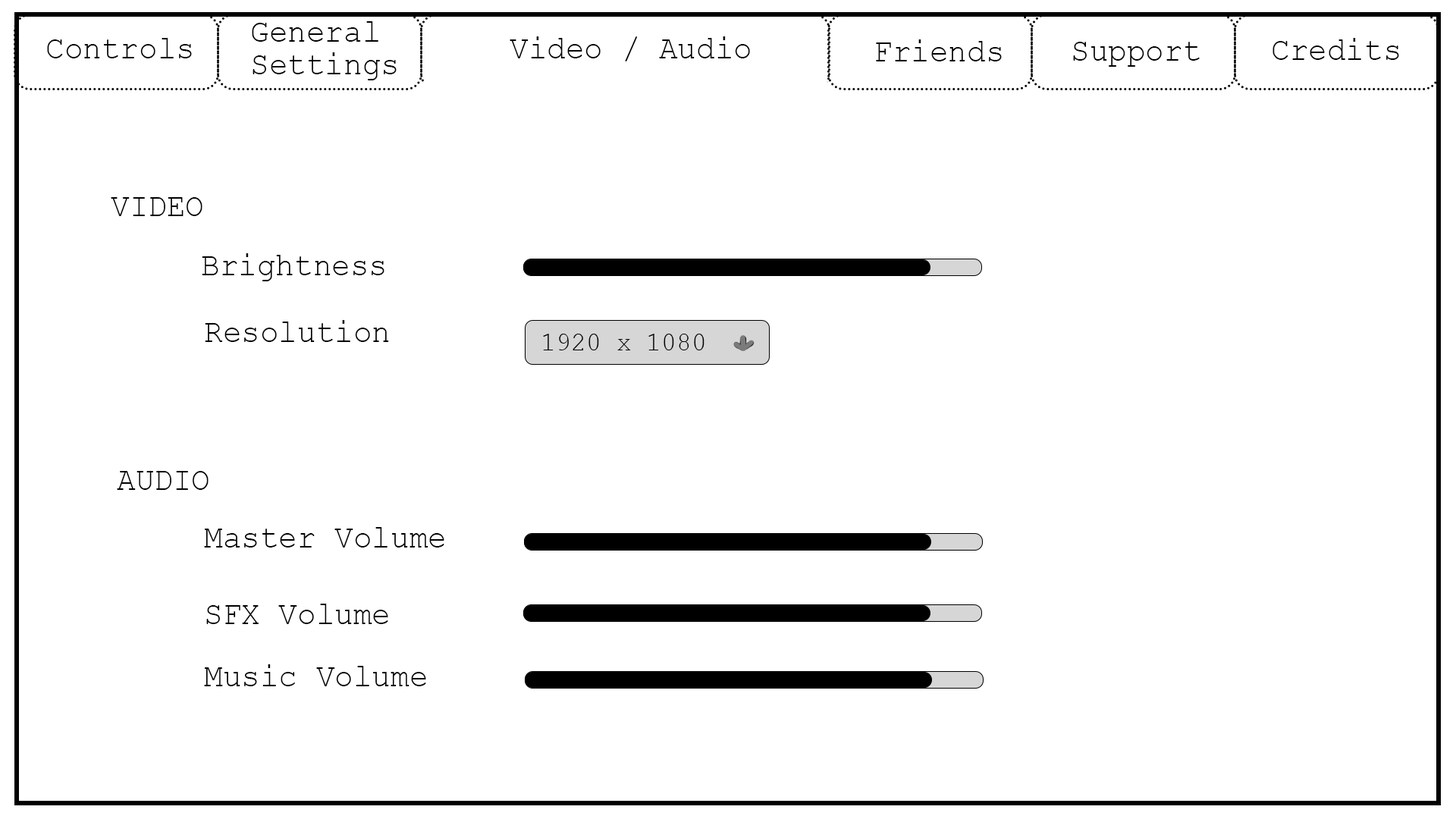
<style>
.page{position:relative;width:1456px;height:819px;background:#ffffff}
.page>*{position:absolute;margin:0}
.t1{font:32.6px/32.6px "CourierNewPSMT";color:#000000;scale:0.95 1}
.t2{font:32.6px "CourierNewPSMT";color:#000000;scale:0.95 1}
</style>
<div class="page">
<p class="t1" style="left:252px;top:21px;width:145px;height:59px">General<br>Settings</p>
<p class="t2" style="left:47px;top:38px;width:145px;height:20px">Controls</p>
<p class="t2" style="left:510px;top:36px;width:240px;height:25px">Video / Audio</p>
<p class="t2" style="left:876px;top:39px;width:126px;height:22px">Friends</p>
<p class="t2" style="left:1073px;top:42px;width:127px;height:25px">Support</p>
<p class="t2" style="left:1272px;top:38px;width:127px;height:22px">Credits</p>
<p class="t2" style="left:111px;top:197px;width:91px;height:19px">VIDEO</p>
<p class="t2" style="left:202px;top:253px;width:182px;height:28px">Brightness</p>
<p class="t2" style="left:205px;top:320px;width:184px;height:22px">Resolution</p>
<p class="t2" style="left:117px;top:471px;width:92px;height:19px">AUDIO</p>
<p class="t2" style="left:204px;top:527px;width:240px;height:21px">Master Volume</p>
<p class="t2" style="left:206px;top:604px;width:182px;height:20px">SFX Volume</p>
<p class="t2" style="left:204px;top:664px;width:222px;height:22px">Music Volume</p>
</div>
